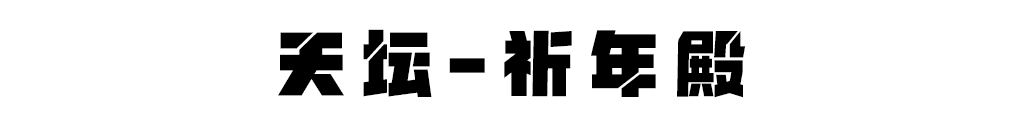
<style>
.page{position:relative;width:1024px;height:128px;background:#ffffff}
.page>*{position:absolute;margin:0}
.t1{font:71.8px "AaJiJiaHei";letter-spacing:0.2em;color:#000000}
</style>
<div class="page">
<p class="t1" style="left:278px;top:29px;width:468px;height:69px">天坛-祈年殿</p>
</div>
